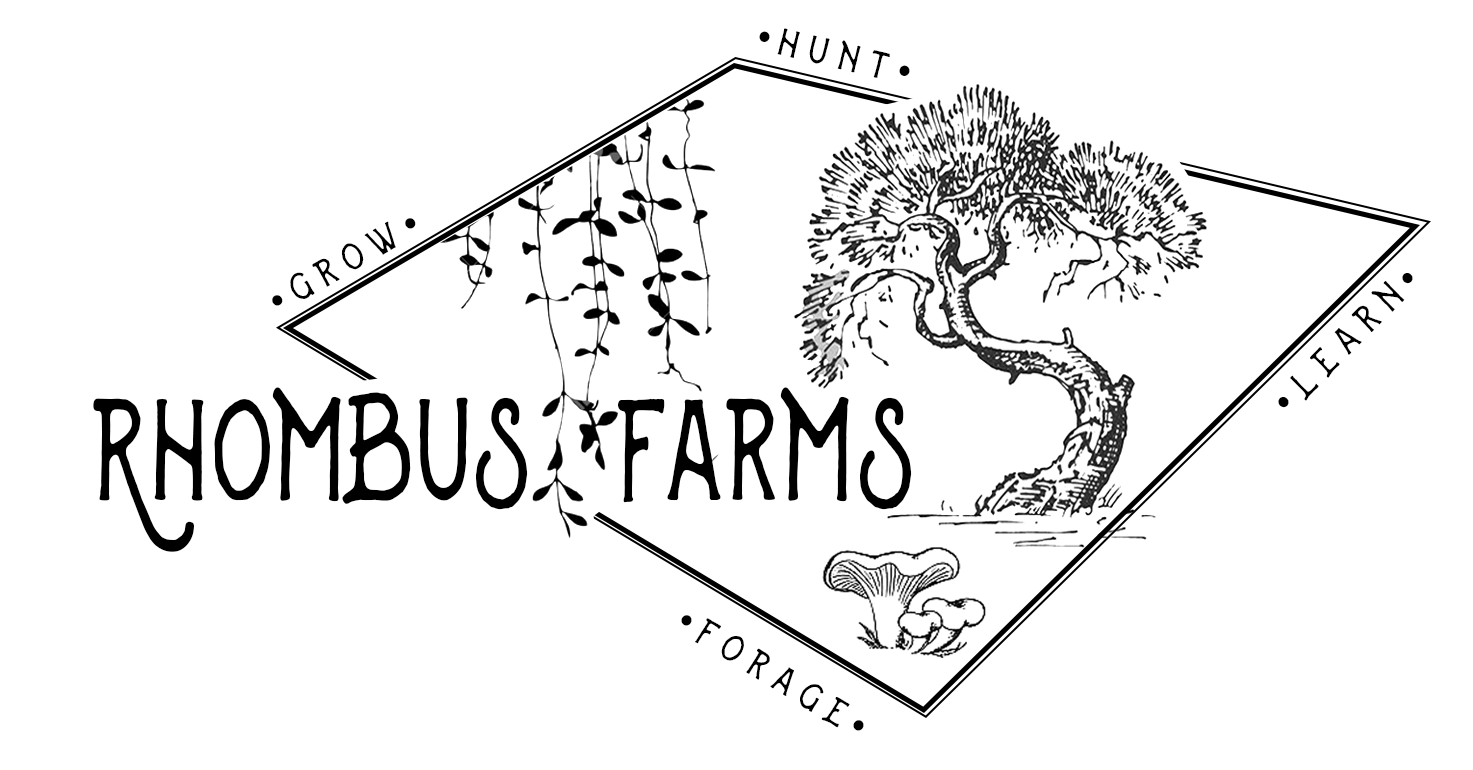
<style>
.page{position:relative;width:1473px;height:770px;background:#ffffff}
.page>*{position:absolute;margin:0}
.t1{font:50px "SwistblnkBanthers";letter-spacing:0.2em;color:#000000;scale:0.95 1}
.t2{font:50px "MyriadPro-Regular";letter-spacing:0.2em;color:#000000;scale:0.95 1}
.t3{font:189.8px "SwistblnkBanthers";color:#000000;scale:0.71 1}
.t4{font:200px "SwistblnkBanthers";color:#000000;scale:0.71 1}
</style>
<div class="page">
<p class="t1" style="left:759px;top:28px;width:151px;height:50px;rotate:13deg"><span class="t2">•</span>hunt<span class="t2">•</span></p>
<p class="t1" style="left:272px;top:218px;width:144px;height:88px;rotate:-30deg"><span class="t2">•</span>grow<span class="t2">•</span></p>
<p class="t1" style="left:1278px;top:273px;width:135px;height:135px;rotate:-45deg"><span class="t2">•</span>learn<span class="t2">•</span></p>
<p class="t3" style="left:93px;top:387px;width:819px;height:165px">Rhom<span class="t4">B</span>us  Farms</p>
<p class="t1" style="left:681px;top:615px;width:183px;height:116px;rotate:31deg"><span class="t2">•</span>forage<span class="t2">•</span></p>
</div>
